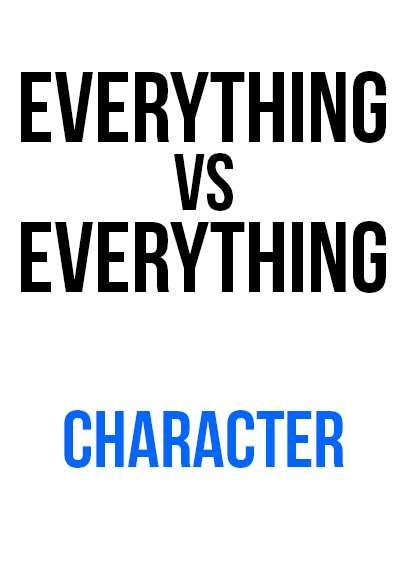
<style>
.page{position:relative;width:408px;height:585px;background:#ffffff}
.page>*{position:absolute;margin:0}
.t1{font:100px "BebasNeue";color:#000000}
.t2{font:80px "BebasNeue";color:#000000}
.t3{font:80px "BebasNeue";color:#0066ff}
</style>
<div class="page">
<p class="t1" style="left:21px;top:71px;width:365px;height:72px">everything</p>
<p class="t2" style="left:174px;top:153px;width:59px;height:58px">vs</p>
<p class="t1" style="left:21px;top:221px;width:365px;height:72px">everything</p>
<p class="t3" style="left:64px;top:410px;width:280px;height:58px">character</p>
</div>
